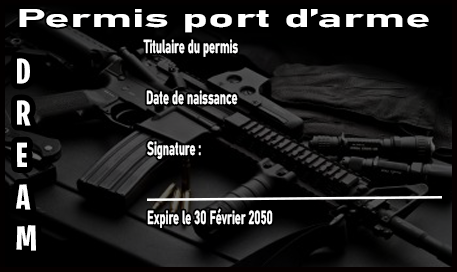
<style>
.page{position:relative;width:457px;height:272px;background:#000000}
.page>*{position:absolute;margin:0}
.t1{font:25.5px "Bahnschrift-Bold";color:#ffffff;scale:1.9 1}
.t2{font:18.7px "Bahnschrift-Bold";color:#ffffff;scale:0.6 1}
.t3{font:34.8px "BurbankBigCondensed-Bold";color:#ffffff}
</style>
<div class="page">
<p class="t1" style="left:19px;top:9px;width:410px;height:24px">Permis port d’arme</p>
<p class="t2" style="left:143px;top:39px;width:95px;height:18px">Titulaire du permis</p>
<p class="t3" style="left:16px;top:58px;width:20px;height:193px">D<br>R<br>E<br>A<br>M</p>
<p class="t2" style="left:146px;top:90px;width:92px;height:15px">Date de naissance</p>
<p class="t2" style="left:147px;top:141px;width:54px;height:18px">Signature :</p>
<p class="t2" style="left:147px;top:208px;width:126px;height:20px">Expire le 30 Février 2050</p>
</div>
